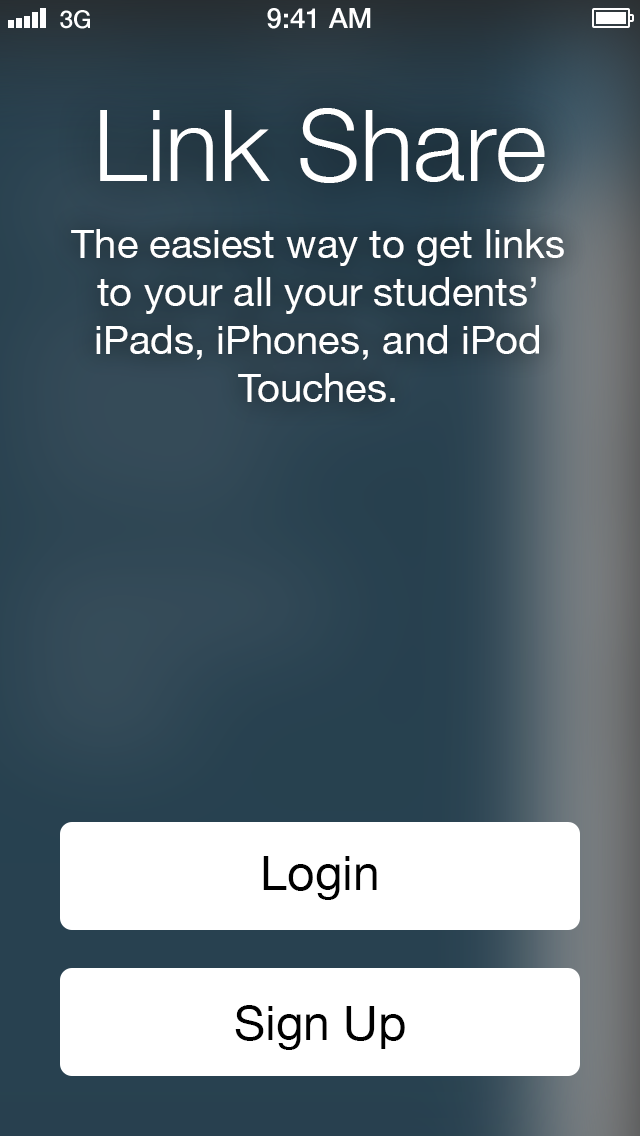
<style>
.page{position:relative;width:640px;height:1136px}
.page>*{position:absolute;margin:0}
.t1{font:24.5px "HelveticaNeue-Medium";color:#ffffff}
.t2{font:28.1px "HelveticaNeue-Medium";color:#ffffff}
.t3{font:100px "HelveticaNeue-Light";color:#ffffff}
.t4{font:40px "HelveticaNeue";color:#ffffff}
.t5{font:48px "HelveticaNeue";color:#000000}
</style>
<div class="page">
<p class="t1" style="left:60px;top:10px;width:30px;height:19px">3G</p>
<p class="t2" style="left:267px;top:8px;width:104px;height:21px">9:41 AM</p>
<p class="t3" style="left:100px;top:108px;width:445px;height:75px">Link Share</p>
<p class="t4" style="left:71px;top:229px;width:493px;height:173px;text-align:center">The easiest way to get links to your all your students’ iPads, iPhones, and iPod Touches.</p>
<p class="t5" style="left:263px;top:856px;width:114px;height:44px">Login</p>
<p class="t5" style="left:235px;top:1005px;width:170px;height:45px">Sign Up</p>
</div>
